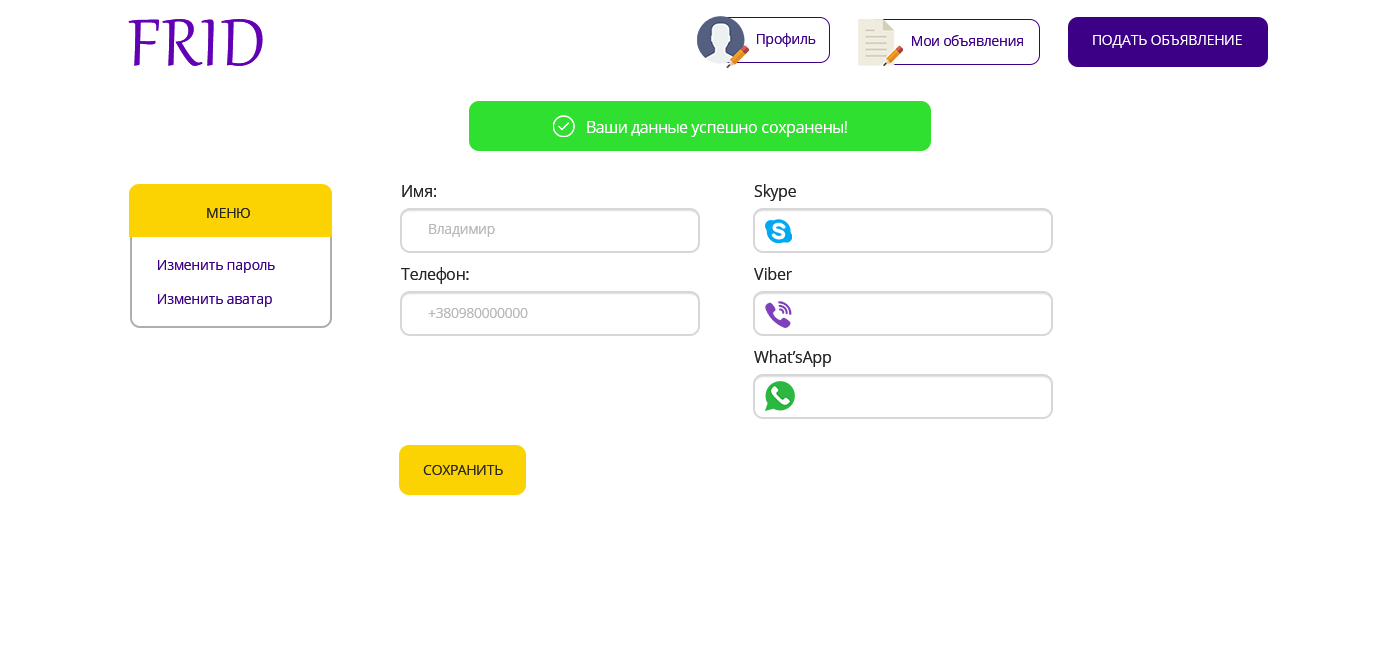
<style>
.page{position:relative;width:1400px;height:650px;background:#ffffff}
.page>*{position:absolute;margin:0}
.t1{font:81.3px "Gabriola";letter-spacing:0.025em;color:#6200b3}
.t2{font:14px "OpenSans";letter-spacing:-0.024em;color:#3b0086}
.t3{font:14px "OpenSans";letter-spacing:-0.024em;color:#ffffff}
.t4{font:16px "OpenSans";letter-spacing:-0.024em;color:#ffffff}
.t5{font:16px "OpenSans";letter-spacing:-0.024em;color:#252525}
.t6{font:14px "OpenSans";letter-spacing:-0.024em;color:#252525}
.t7{font:14px "OpenSans";letter-spacing:-0.024em;color:#b7b7b7}
</style>
<div class="page">
<p class="t1" style="left:128px;top:19px;width:135px;height:47px">FRID</p>
<p class="t2" style="left:757px;top:33px;width:59px;height:14px">Профиль</p>
<p class="t2" style="left:912px;top:35px;width:111px;height:11px">Мои объявления</p>
<p class="t3" style="left:1093px;top:35px;width:149px;height:13px">ПОДАТЬ ОБЪЯВЛЕНИЕ</p>
<p class="t4" style="left:587px;top:121px;width:260px;height:16px">Ваши данные успешно сохранены!</p>
<p class="t5" style="left:402px;top:185px;width:34px;height:12px">Имя:</p>
<p class="t5" style="left:754px;top:184px;width:42px;height:17px">Skype</p>
<p class="t6" style="left:207px;top:208px;width:43px;height:10px">МЕНЮ</p>
<p class="t7" style="left:429px;top:224px;width:66px;height:13px">Владимир</p>
<p class="t2" style="left:158px;top:260px;width:117px;height:13px">Изменить пароль</p>
<p class="t5" style="left:401px;top:267px;width:68px;height:17px">Телефон:</p>
<p class="t5" style="left:754px;top:267px;width:38px;height:13px">Viber</p>
<p class="t2" style="left:158px;top:294px;width:114px;height:13px">Изменить аватар</p>
<p class="t7" style="left:428px;top:308px;width:100px;height:10px">+380980000000</p>
<p class="t5" style="left:754px;top:350px;width:77px;height:17px">What’sApp</p>
<p class="t6" style="left:423px;top:465px;width:80px;height:10px">СОХРАНИТЬ</p>
</div>
